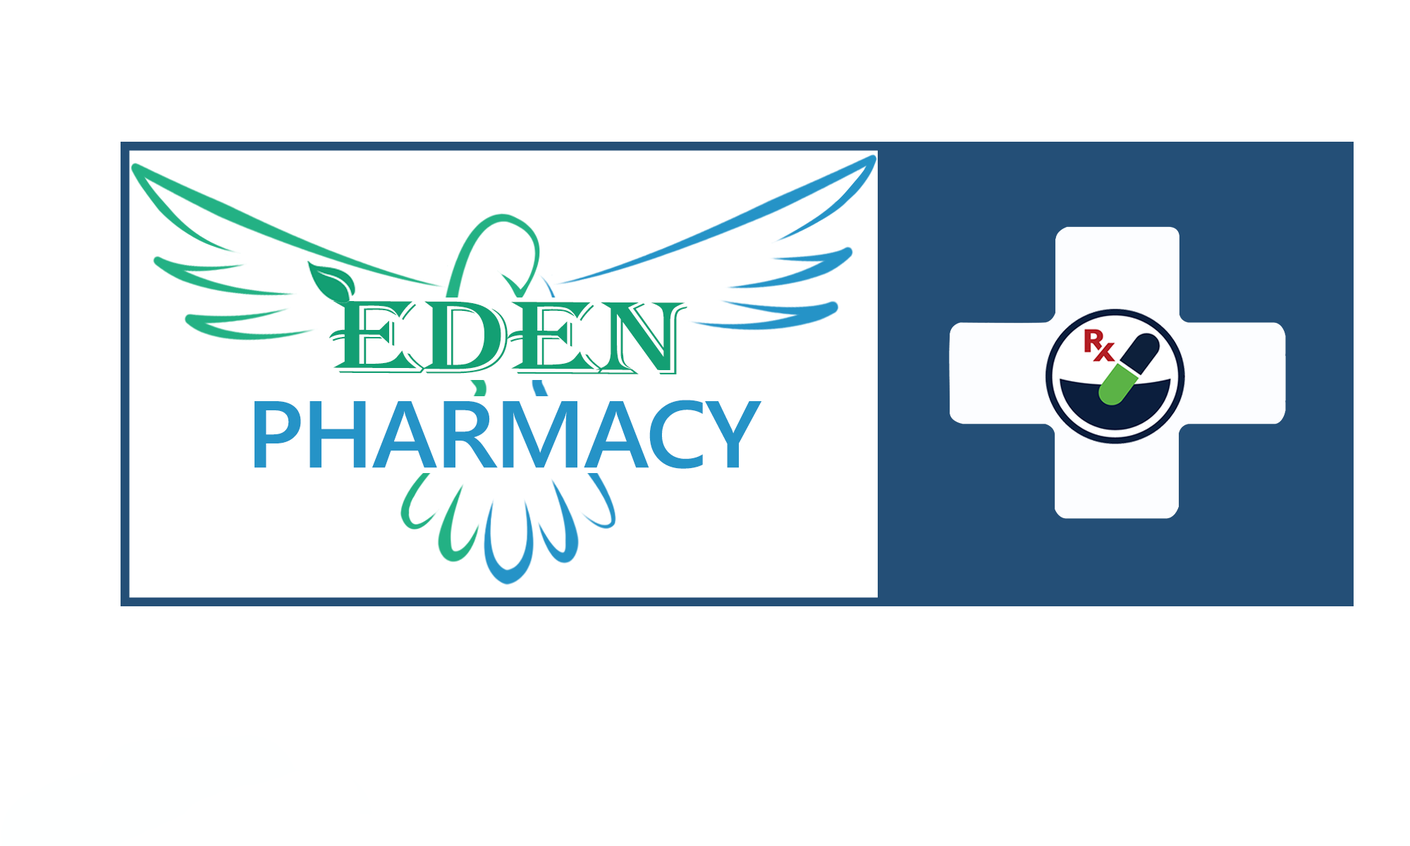
<style>
.page{position:relative;width:1410px;height:846px;background:#ffffff}
.page>*{position:absolute;margin:0}
.t1{font:107.4px "Algerian";letter-spacing:-0.025em;color:#139f73;scale:1.41 1}
.t2{font:94.5px "SegoeUI-Semibold";letter-spacing:-0.025em;color:#2593c7;scale:1.05 1}
</style>
<div class="page">
<p class="t1" style="left:328px;top:301px;width:359px;height:73px">EDEN</p>
<p class="t2" style="left:254px;top:400px;width:508px;height:69px">PHARMACY</p>
</div>
